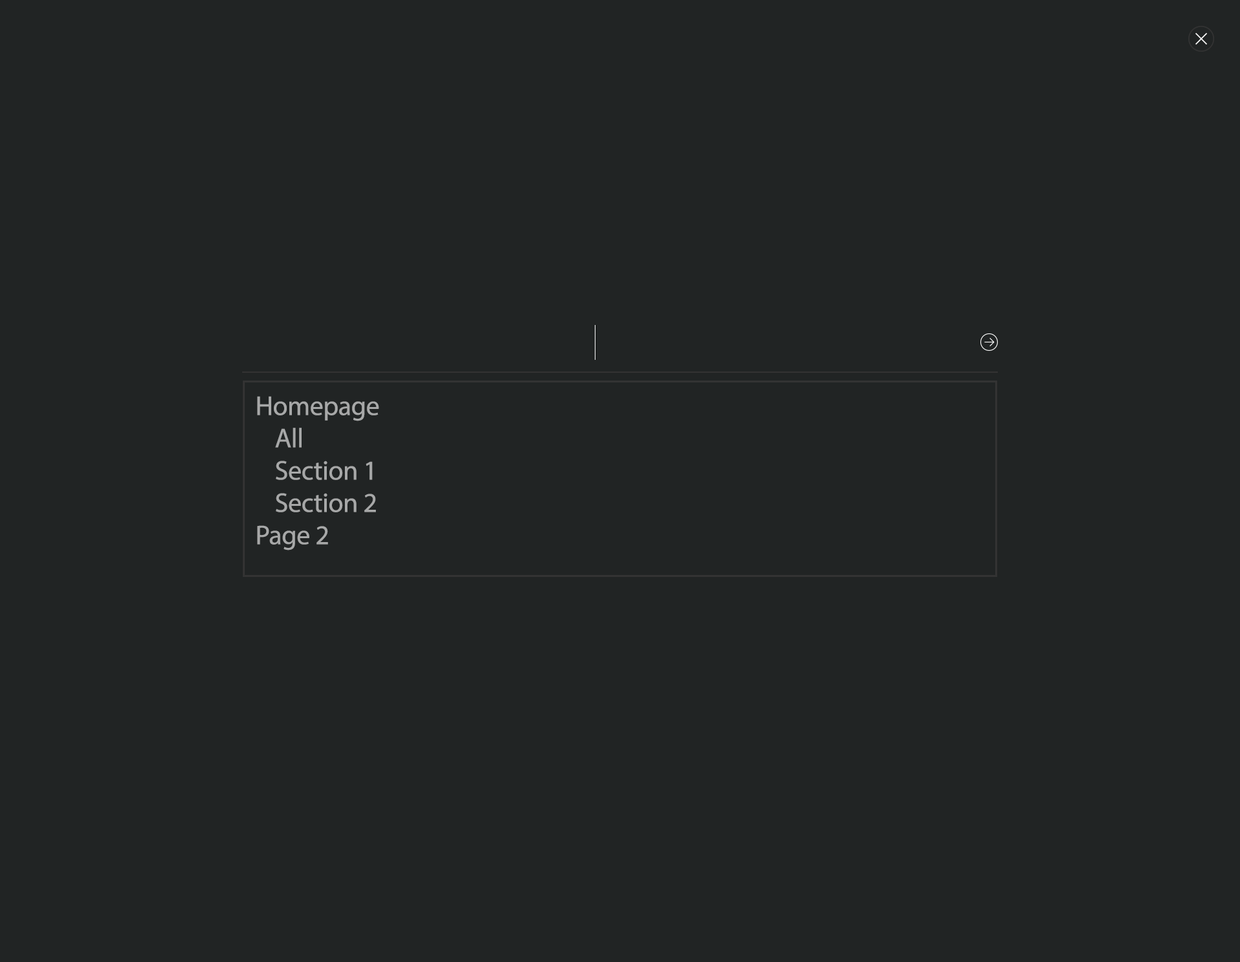
<style>
.page{position:relative;width:1240px;height:962px;background:#212424}
.page>*{position:absolute;margin:0}
.t1{font:27.1px "MyriadPro-Regular";letter-spacing:-0.01em;color:#a7a8a8}
</style>
<div class="page">
<p class="t1" style="left:257px;top:396px;width:122px;height:25px">Homepage</p>
<p class="t1" style="left:275px;top:428px;width:27px;height:20px">All</p>
<p class="t1" style="left:276px;top:460px;width:97px;height:20px">Section 1</p>
<p class="t1" style="left:276px;top:493px;width:100px;height:19px">Section 2</p>
<p class="t1" style="left:257px;top:525px;width:71px;height:25px">Page 2</p>
</div>
